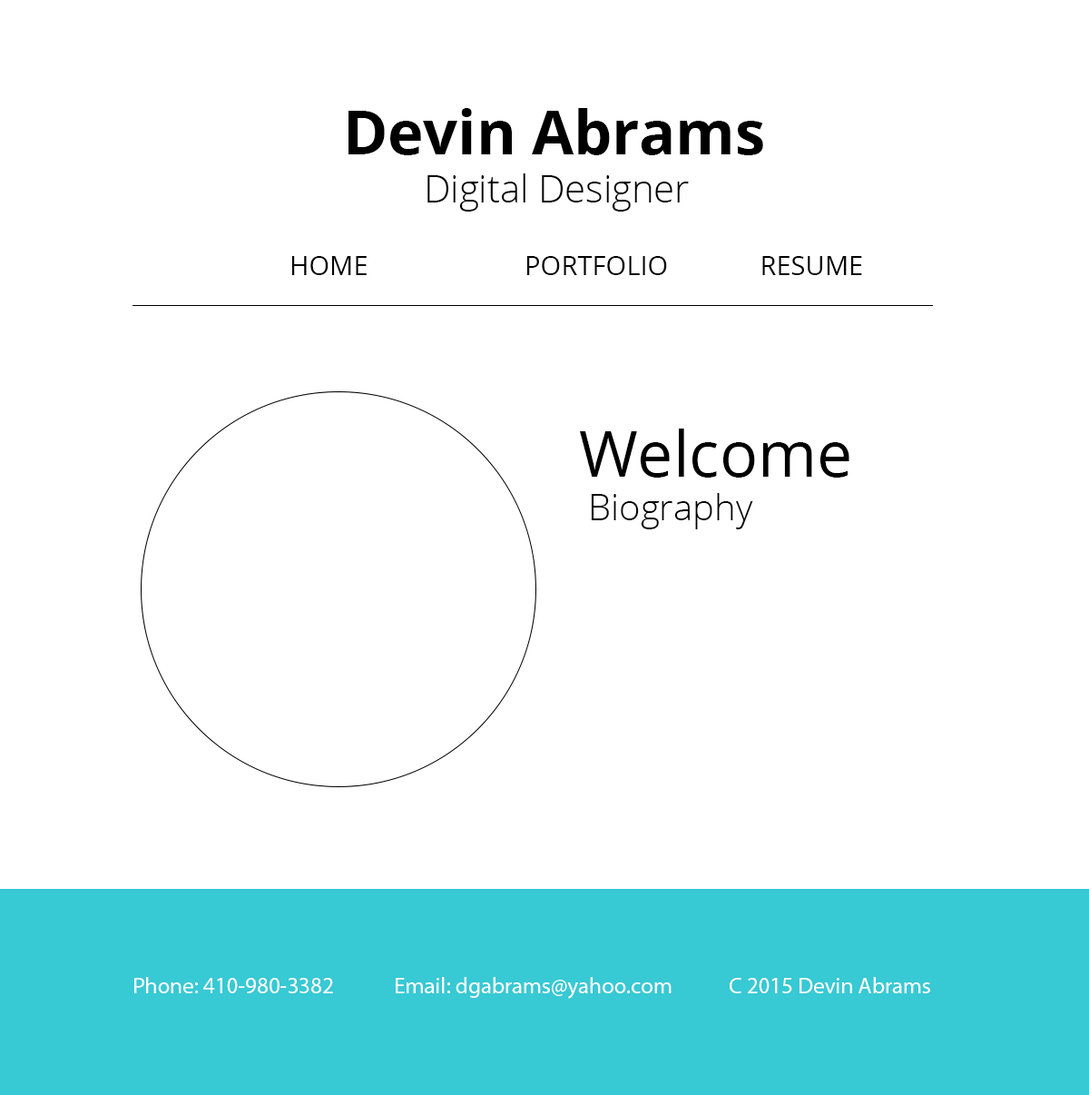
<style>
.page{position:relative;width:1089px;height:1095px;background:#ffffff}
.page>*{position:absolute;margin:0}
.t1{font:60.5px "OpenSans-Bold";color:#000000}
.t2{font:37.8px "OpenSans-Light";color:#000000}
.t3{font:26.5px "OpenSans";color:#000000}
.t4{font:36.3px "OpenSans-Light";color:#000000}
.t5{font:63.5px "OpenSans";color:#000000}
.t6{font:22.7px "MyriadPro-Regular";color:#ffffff}
</style>
<div class="page">
<p class="t1" style="left:349px;top:108px;width:414px;height:47px">Devin Abrams</p>
<p class="t2" style="left:428px;top:173px;width:261px;height:38px">Digital Designer</p>
<p class="t3" style="left:291px;top:256px;width:571px;height:19px">HOME    PORTFOLIO   RESUME</p>
<p class="t4" style="left:580px;top:428px;width:270px;height:101px"><span class="t5">Welcome<br></span> Biography</p>
<p class="t6" style="left:134px;top:977px;width:199px;height:16px">Phone: 410-980-3382</p>
<p class="t6" style="left:396px;top:977px;width:276px;height:21px">Email: dgabrams@yahoo.com</p>
<p class="t6" style="left:730px;top:977px;width:200px;height:16px">C 2015 Devin Abrams</p>
</div>
